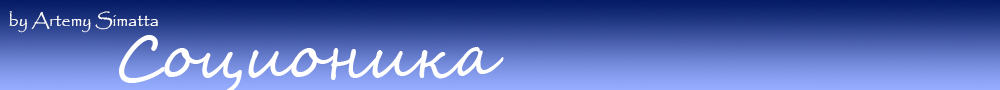
<style>
.page{position:relative;width:1000px;height:90px}
.page>*{position:absolute;margin:0}
.t1{font:18px "Papyrus-Regular";color:#ffffff}
.t2{font:60px "SegoeScript";color:#ffffff}
</style>
<div class="page">
<p class="t1" style="left:9px;top:11px;width:149px;height:22px">by Artemy Simatta</p>
<p class="t2" style="left:119px;top:35px;width:385px;height:57px">Соционика</p>
</div>
